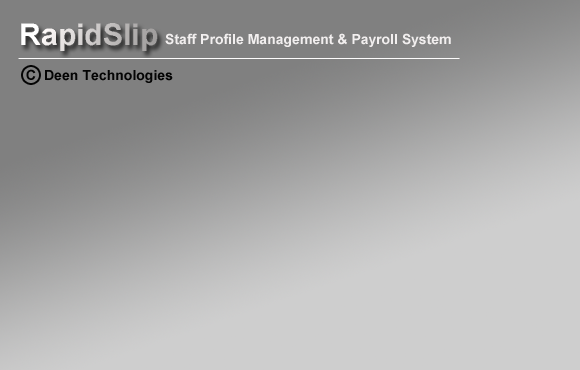
<style>
.page{position:relative;width:580px;height:370px}
.page>*{position:absolute;margin:0}
.t1{font:14px "MS Dialog";color:#f2efef}
.t2{font:14px "MS Dialog";color:#040404}
</style>
<div class="page">
<p class="t1" style="left:165px;top:33px;width:286px;height:14px">Staff Profile Management &amp; Payroll System</p>
<p class="t2" style="left:26px;top:69px;width:10px;height:11px">C</p>
<p class="t2" style="left:45px;top:70px;width:128px;height:13px">Deen Technologies</p>
</div>
